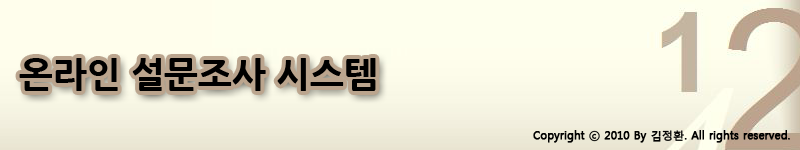
<style>
.page{position:relative;width:800px;height:150px}
.page>*{position:absolute;margin:0}
.t1{font:36px "NanumGothicExtraBold";color:#000000}
.t2{font:11px "MalgunGothicRegular";color:#000000;font-weight:bold}
</style>
<div class="page">
<p class="t1" style="left:19px;top:58px;width:357px;height:33px">온라인 설문조사 시스템</p>
<p class="t2" style="left:533px;top:130px;width:257px;height:13px">Copyright ⓒ 2010 By 김정환. All rights reserved.</p>
</div>
